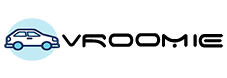
<style>
.page{position:relative;width:227px;height:78px;background:#ffffff}
.page>*{position:absolute;margin:0}
.t1{font:26px "SpaceAge";letter-spacing:0.2em;color:#000000;text-transform:uppercase}
.t2{font:30px "SpaceAge";letter-spacing:0.2em;color:#000000;text-transform:uppercase}
</style>
<div class="page">
<p class="t1" style="left:62px;top:34px;width:19px;height:13px">V</p>
<p class="t2" style="left:82px;top:34px;width:24px;height:14px">R</p>
<p class="t2" style="left:108px;top:33px;width:26px;height:14px">O</p>
<p class="t2" style="left:135px;top:33px;width:26px;height:14px">O</p>
<p class="t2" style="left:162px;top:34px;width:26px;height:14px">M</p>
<p class="t2" style="left:193px;top:34px;width:4px;height:14px">I</p>
<p class="t2" style="left:198px;top:34px;width:26px;height:14px">E</p>
</div>
